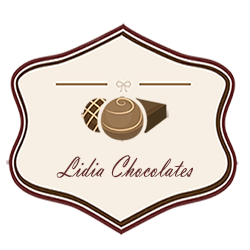
<style>
.page{position:relative;width:250px;height:250px;background:#ffffff}
.page>*{position:absolute;margin:0}
.t1{font:31.3px "VladimirScript";color:#652d2d;scale:0.75 1}
</style>
<div class="page">
<p class="t1" style="left:56px;top:155px;width:137px;height:23px">Lidia Chocolates</p>
</div>
